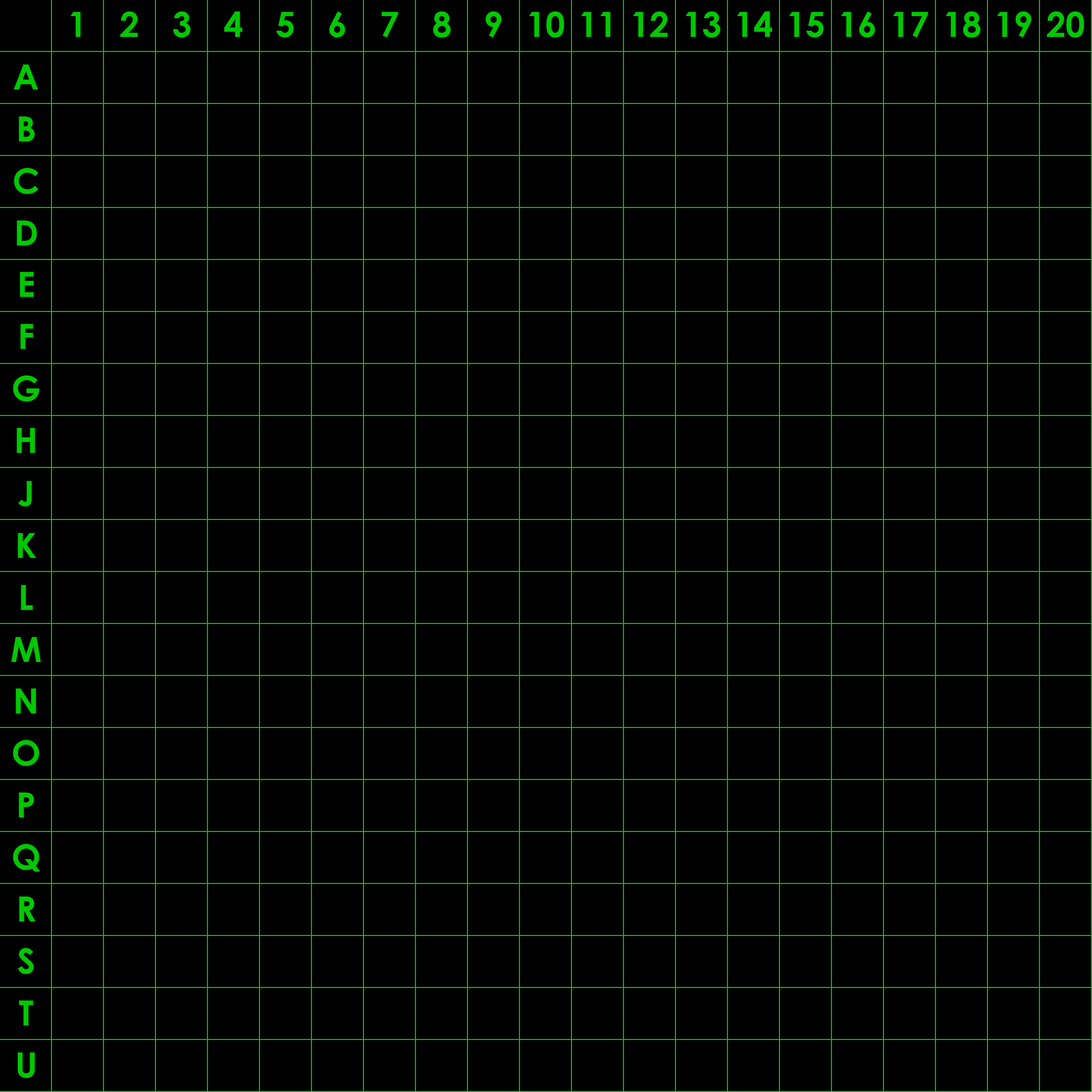
<style>
.page{position:relative;width:1092px;height:1092px;background:#000000}
.page>*{position:absolute;margin:0}
.t1{font:34.7px "CenturyGothic-Bold";color:#00c800}
</style>
<div class="page">
<p class="t1" style="left:70px;top:12px;width:11px;height:25px">1</p>
<p class="t1" style="left:120px;top:11px;width:18px;height:26px">2</p>
<p class="t1" style="left:173px;top:11px;width:18px;height:26px">3</p>
<p class="t1" style="left:224px;top:11px;width:18px;height:26px">4</p>
<p class="t1" style="left:276px;top:12px;width:18px;height:25px">5</p>
<p class="t1" style="left:329px;top:11px;width:16px;height:26px">6</p>
<p class="t1" style="left:382px;top:12px;width:16px;height:25px">7</p>
<p class="t1" style="left:433px;top:11px;width:18px;height:26px">8</p>
<p class="t1" style="left:486px;top:11px;width:16px;height:26px">9</p>
<p class="t1" style="left:529px;top:11px;width:35px;height:26px">10</p>
<p class="t1" style="left:581px;top:12px;width:29px;height:25px">11</p>
<p class="t1" style="left:633px;top:11px;width:35px;height:26px">12</p>
<p class="t1" style="left:685px;top:11px;width:36px;height:26px">13</p>
<p class="t1" style="left:737px;top:11px;width:35px;height:26px">14</p>
<p class="t1" style="left:789px;top:12px;width:35px;height:25px">15</p>
<p class="t1" style="left:841px;top:11px;width:34px;height:26px">16</p>
<p class="t1" style="left:893px;top:12px;width:35px;height:25px">17</p>
<p class="t1" style="left:945px;top:11px;width:36px;height:26px">18</p>
<p class="t1" style="left:997px;top:11px;width:35px;height:26px">19</p>
<p class="t1" style="left:1047px;top:11px;width:37px;height:26px">20</p>
<p class="t1" style="left:14px;top:64px;width:24px;height:25px">A</p>
<p class="t1" style="left:19px;top:116px;width:16px;height:25px">B</p>
<p class="t1" style="left:14px;top:168px;width:24px;height:26px">C</p>
<p class="t1" style="left:17px;top:220px;width:20px;height:25px">D</p>
<p class="t1" style="left:20px;top:272px;width:14px;height:25px">E</p>
<p class="t1" style="left:20px;top:324px;width:13px;height:25px">F</p>
<p class="t1" style="left:13px;top:375px;width:27px;height:26px">G</p>
<p class="t1" style="left:17px;top:428px;width:18px;height:25px">H</p>
<p class="t1" style="left:18px;top:481px;width:14px;height:25px">J</p>
<p class="t1" style="left:18px;top:533px;width:18px;height:25px">K</p>
<p class="t1" style="left:21px;top:585px;width:12px;height:25px">L</p>
<p class="t1" style="left:11px;top:637px;width:30px;height:25px">M</p>
<p class="t1" style="left:16px;top:688px;width:20px;height:25px">N</p>
<p class="t1" style="left:13px;top:740px;width:27px;height:26px">O</p>
<p class="t1" style="left:19px;top:792px;width:15px;height:25px">P</p>
<p class="t1" style="left:13px;top:844px;width:27px;height:28px">Q</p>
<p class="t1" style="left:19px;top:896px;width:16px;height:25px">R</p>
<p class="t1" style="left:18px;top:948px;width:16px;height:26px">S</p>
<p class="t1" style="left:19px;top:1000px;width:14px;height:25px">T</p>
<p class="t1" style="left:18px;top:1052px;width:17px;height:26px">U</p>
</div>
